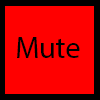
<style>
.page{position:relative;width:100px;height:100px;background:#ff0000}
.page>*{position:absolute;margin:0}
.t1{font:30px "MyriadPro-Regular";color:#000000}
</style>
<div class="page">
<p class="t1" style="left:17px;top:37px;width:63px;height:21px">Mute</p>
</div>
